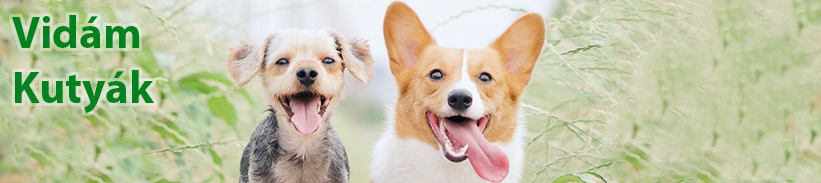
<style>
.page{position:relative;width:821px;height:183px}
.page>*{position:absolute;margin:0}
.t1{font:45.1px "MyriadPro-Bold";color:#00831f}
</style>
<div class="page">
<p class="t1" style="left:12px;top:15px;width:143px;height:98px">Vidám <br>Kutyák</p>
</div>
